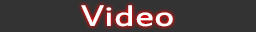
<style>
.page{position:relative;width:256px;height:32px;background:#333333}
.page>*{position:absolute;margin:0}
.t1{font:33px "EstrangeloEdessa";color:#ffffff;scale:1.2 1}
</style>
<div class="page">
<p class="t1" style="left:81px;top:5px;width:92px;height:22px">Video</p>
</div>
